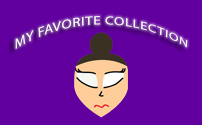
<style>
.page{position:relative;width:202px;height:125px;background:#61009e}
.page>*{position:absolute;margin:0}
.t1{font:13.8px "MyriadPro-Regular";letter-spacing:0.04em;color:#ffffff}
</style>
<div class="page">
<p class="t1" style="left:15px;top:16px;width:173px;height:33px">MY FAVORITE COLLECTION</p>
</div>
